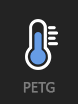
<style>
.page{position:relative;width:78px;height:104px;background:#232323}
.page>*{position:absolute;margin:0}
.t1{font:14px "SegoeUI";color:#7c7c7c;font-weight:bold}
</style>
<div class="page">
<p class="t1" style="left:23px;top:82px;width:32px;height:11px">PETG</p>
</div>
